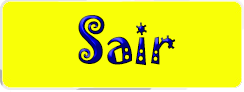
<style>
.page{position:relative;width:244px;height:92px;background:#f9ff07}
.page>*{position:absolute;margin:0}
.t1{font:55px "Jokerman-Regular";scale:0.91 1}
</style>
<div class="page">
<p class="t1" style="left:78px;top:15px;width:98px;height:51px">Sair</p>
</div>
